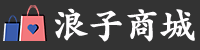
<style>
.page{position:relative;width:200px;height:50px;background:#333333}
.page>*{position:absolute;margin:0}
.t1{font:36px "STKaitiSC-Black";color:#fffeff}
</style>
<div class="page">
<p class="t1" style="left:54px;top:8px;width:141px;height:34px">浪子商城</p>
</div>
